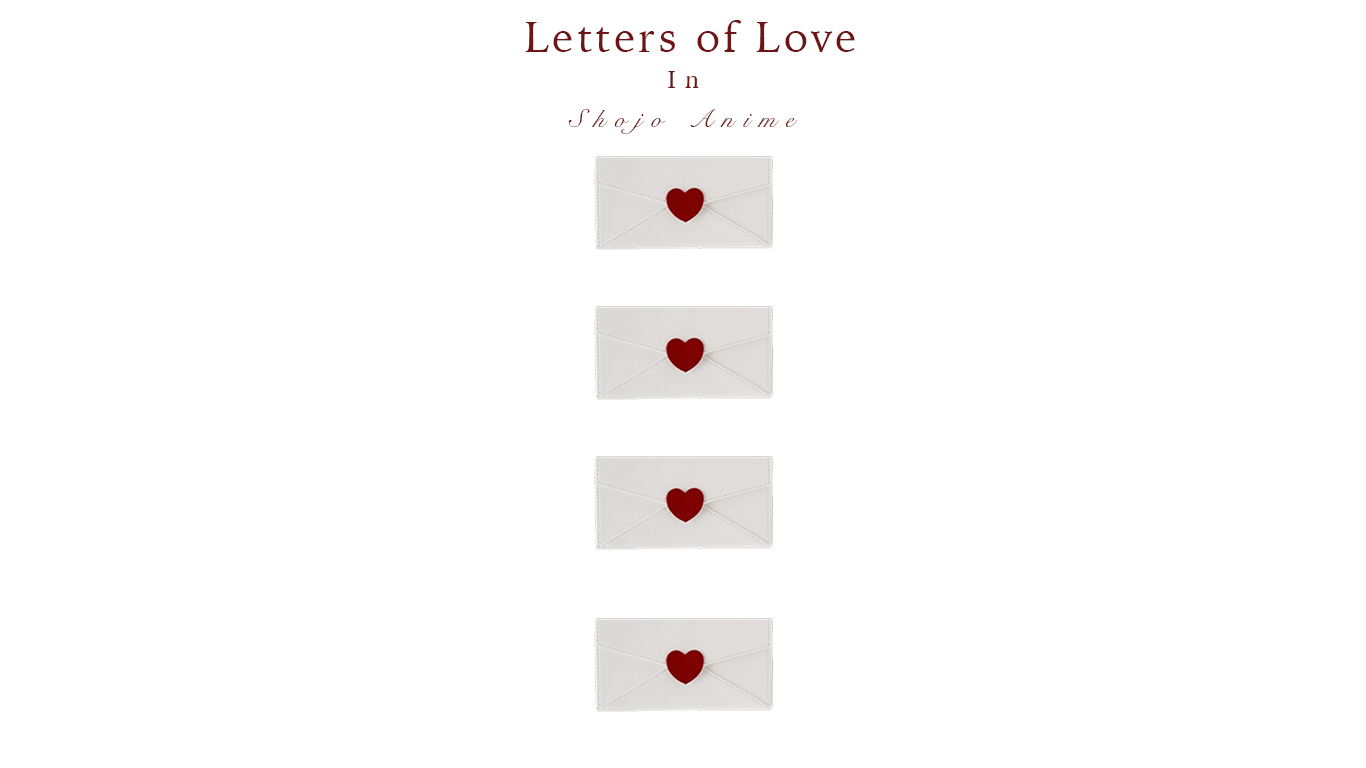
<style>
.page{position:relative;width:1366px;height:768px;background:#ffffff}
.page>*{position:absolute;margin:0}
.t1{font:43.1px "IowanOldStyle-Roman";letter-spacing:0.075em;color:#701515}
.t2{font:24.2px "IowanOldStyle-Roman";letter-spacing:0.4em;color:#701515}
.t3{font:25px "SnellRoundhand";letter-spacing:0.4em;color:#701515}
</style>
<div class="page">
<p class="t1" style="left:525px;top:20px;width:330px;height:32px">Letters of Love</p>
<p class="t2" style="left:668px;top:71px;width:31px;height:17px">In</p>
<p class="t3" style="left:568px;top:109px;width:229px;height:25px">Shojo Anime</p>
</div>
